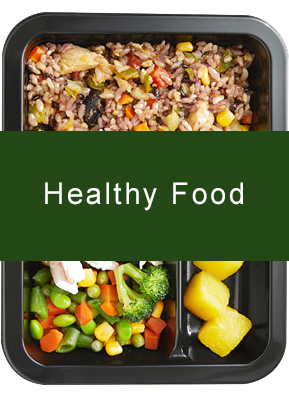
<style>
.page{position:relative;width:289px;height:404px;background:#234816}
.page>*{position:absolute;margin:0}
.t1{font:30px "ArialMT";letter-spacing:0.09em;color:#ffffff;scale:0.97 1}
</style>
<div class="page">
<p class="t1" style="left:45px;top:182px;width:198px;height:29px">Healthy Food</p>
</div>
